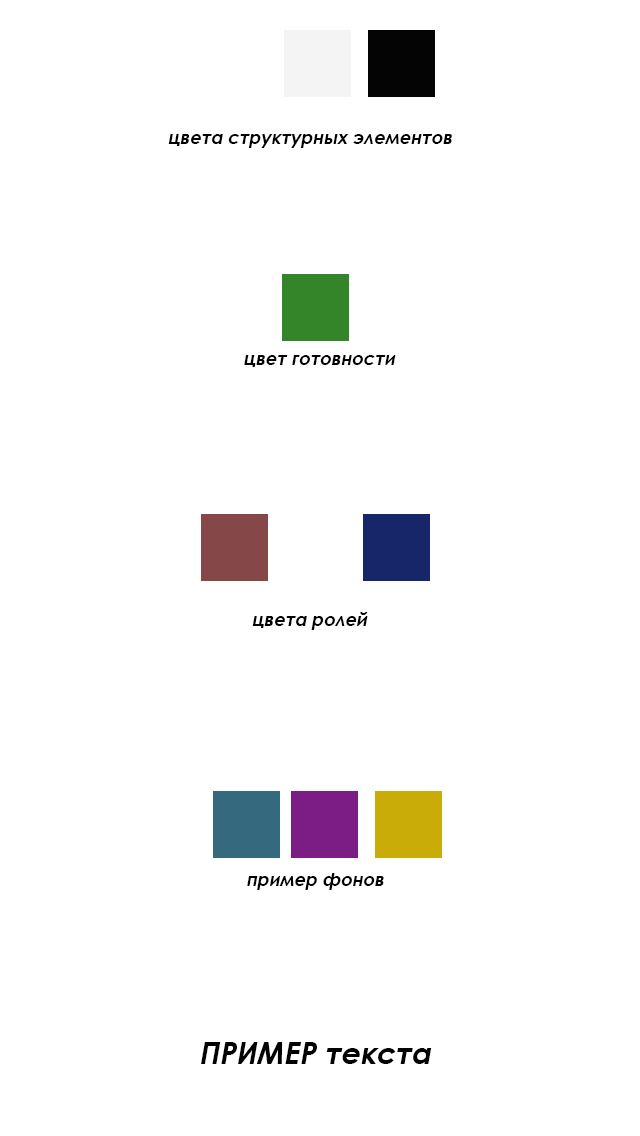
<style>
.page{position:relative;width:640px;height:1136px;background:#ffffff}
.page>*{position:absolute;margin:0}
.t1{font:18px "CenturyGothic-Bold";color:#020202;font-style:italic}
.t2{font:30px "CenturyGothic-Bold";color:#020202;font-style:italic}
</style>
<div class="page">
<p class="t1" style="left:168px;top:134px;width:284px;height:14px">цвета структурных элементов</p>
<p class="t1" style="left:244px;top:355px;width:152px;height:12px">цвет готовности</p>
<p class="t1" style="left:252px;top:612px;width:116px;height:18px">цвета ролей</p>
<p class="t1" style="left:247px;top:873px;width:137px;height:17px">пример фонов</p>
<p class="t2" style="left:201px;top:1042px;width:231px;height:22px">ПРИМЕР текста</p>
</div>
